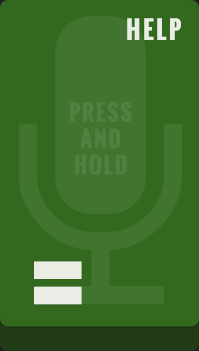
<style>
.page{position:relative;width:199px;height:351px;background:#33691e}
.page>*{position:absolute;margin:0}
.t1{font:22px "Oswald-Bold";letter-spacing:0.067em;color:#537f43;font-weight:bold}
</style>
<div class="page">
<p class="t1" style="left:70px;top:101px;width:62px;height:74px;text-align:center">PRESS<br>AND<br>HOLD</p>
</div>
